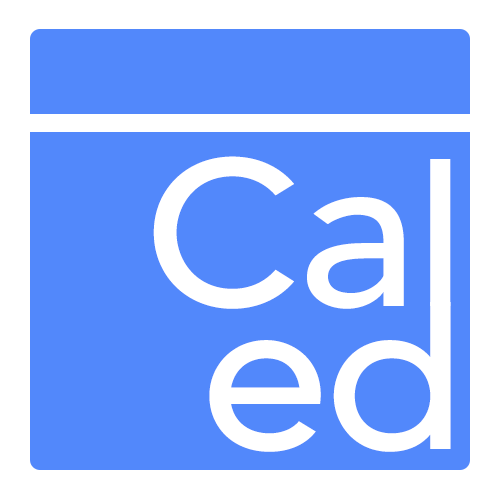
<style>
.page{position:relative;width:500px;height:500px;background:#5288fb}
.page>*{position:absolute;margin:0}
.t1{font:209.8px "MADETOMMY";letter-spacing:-0.01em;color:#ffffff;scale:1.05 1}
</style>
<div class="page">
<p class="t1" style="left:153px;top:156px;width:298px;height:153px">Cal</p>
<p class="t1" style="left:209px;top:302px;width:242px;height:150px">ed</p>
</div>
